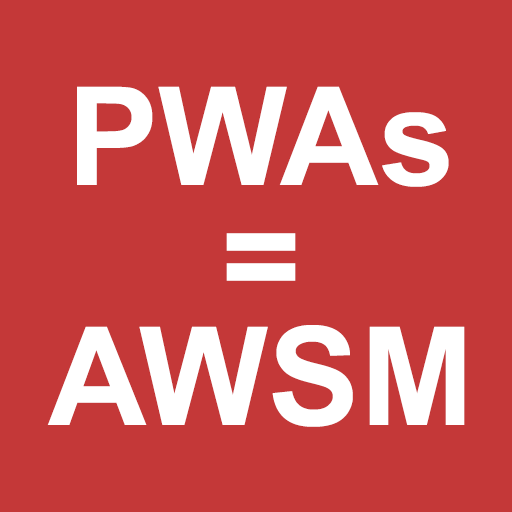
<style>
.page{position:relative;width:512px;height:512px;background:#c43838}
.page>*{position:absolute;margin:0}
.t1{font:137px/120px "Arial-BoldMT";color:#ffffff}
</style>
<div class="page">
<p class="t1" style="left:47px;top:86px;width:418px;height:341px;text-align:center">PWAs<br>=<br>AWSM</p>
</div>
